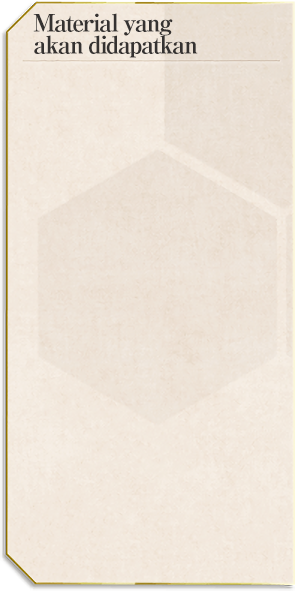
<style>
.page{position:relative;width:295px;height:591px}
.page>*{position:absolute;margin:0}
.t1{font:24px/22px "RyuminPro-ExBold";letter-spacing:-0.08em;color:#353231}
</style>
<div class="page">
<p class="t1" style="left:33px;top:13px;width:165px;height:45px">Material yang<br>akan didapatkan</p>
</div>
